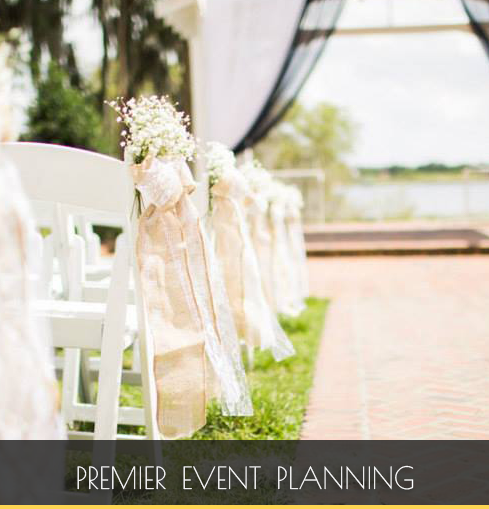
<style>
.page{position:relative;width:489px;height:509px}
.page>*{position:absolute;margin:0}
.t1{font:42.8px "PoiretOne-Regular";color:#ffffff;font-variant:small-caps}
</style>
<div class="page">
<p class="t1" style="left:77px;top:465px;width:337px;height:25px">premier event planning</p>
</div>
